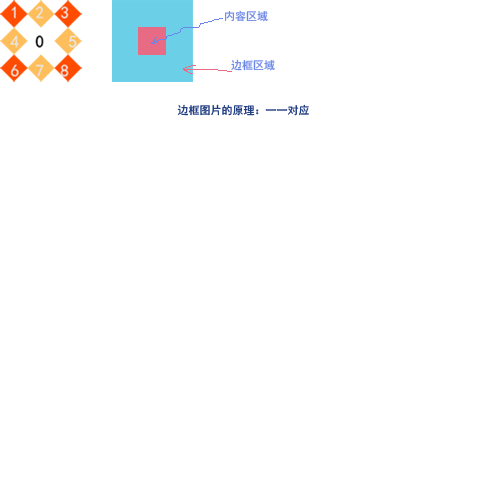
<style>
.page{position:relative;width:500px;height:500px;background:#ffffff}
.page>*{position:absolute;margin:0}
.t1{font:11px "SimHei";color:#6b86e8}
.t2{font:11px "SimHei";color:#17347c}
</style>
<div class="page">
<p class="t1" style="left:225px;top:10px;width:43px;height:12px">内容区域</p>
<p class="t1" style="left:231px;top:59px;width:44px;height:12px">边框区域</p>
<p class="t2" style="left:177px;top:104px;width:132px;height:12px">边框图片的原理：一一对应</p>
</div>
